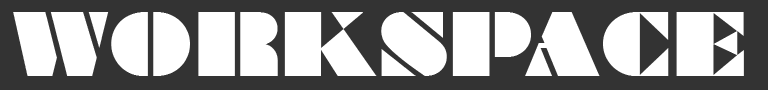
<style>
.page{position:relative;width:768px;height:90px;background:#333333}
.page>*{position:absolute;margin:0}
.t1{font:83.3px "Braggadocio";color:#ffffff}
</style>
<div class="page">
<p class="t1" style="left:13px;top:12px;width:731px;height:64px">WORKSPACE</p>
</div>
